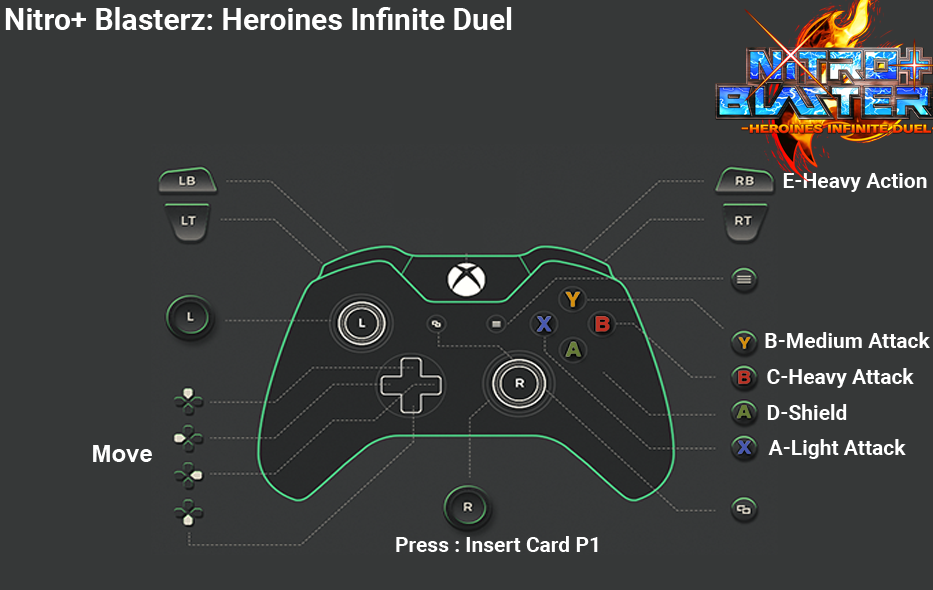
<style>
.page{position:relative;width:933px;height:590px;background:#363838}
.page>*{position:absolute;margin:0}
.t1{font:30px "Roboto-Bold";color:#ffffff}
.t2{font:21px "Roboto-Bold";color:#ffffff}
.t3{font:24px "Arial-BoldMT";color:#fefefe}
</style>
<div class="page">
<p class="t1" style="left:5px;top:7px;width:507px;height:23px">Nitro+ Blasterz: Heroines Infinite Duel</p>
<p class="t2" style="left:783px;top:173px;width:144px;height:19px">E-Heavy Action</p>
<p class="t2" style="left:765px;top:332px;width:165px;height:16px">B-Medium Attack</p>
<p class="t2" style="left:767px;top:368px;width:147px;height:20px">C-Heavy Attack</p>
<p class="t2" style="left:767px;top:404px;width:80px;height:16px">D-Shield</p>
<p class="t3" style="left:93px;top:445px;width:59px;height:17px">Move</p>
<p class="t2" style="left:768px;top:439px;width:138px;height:20px">A-Light Attack</p>
<p class="t2" style="left:396px;top:536px;width:202px;height:16px">Press : Insert Card P1</p>
</div>
